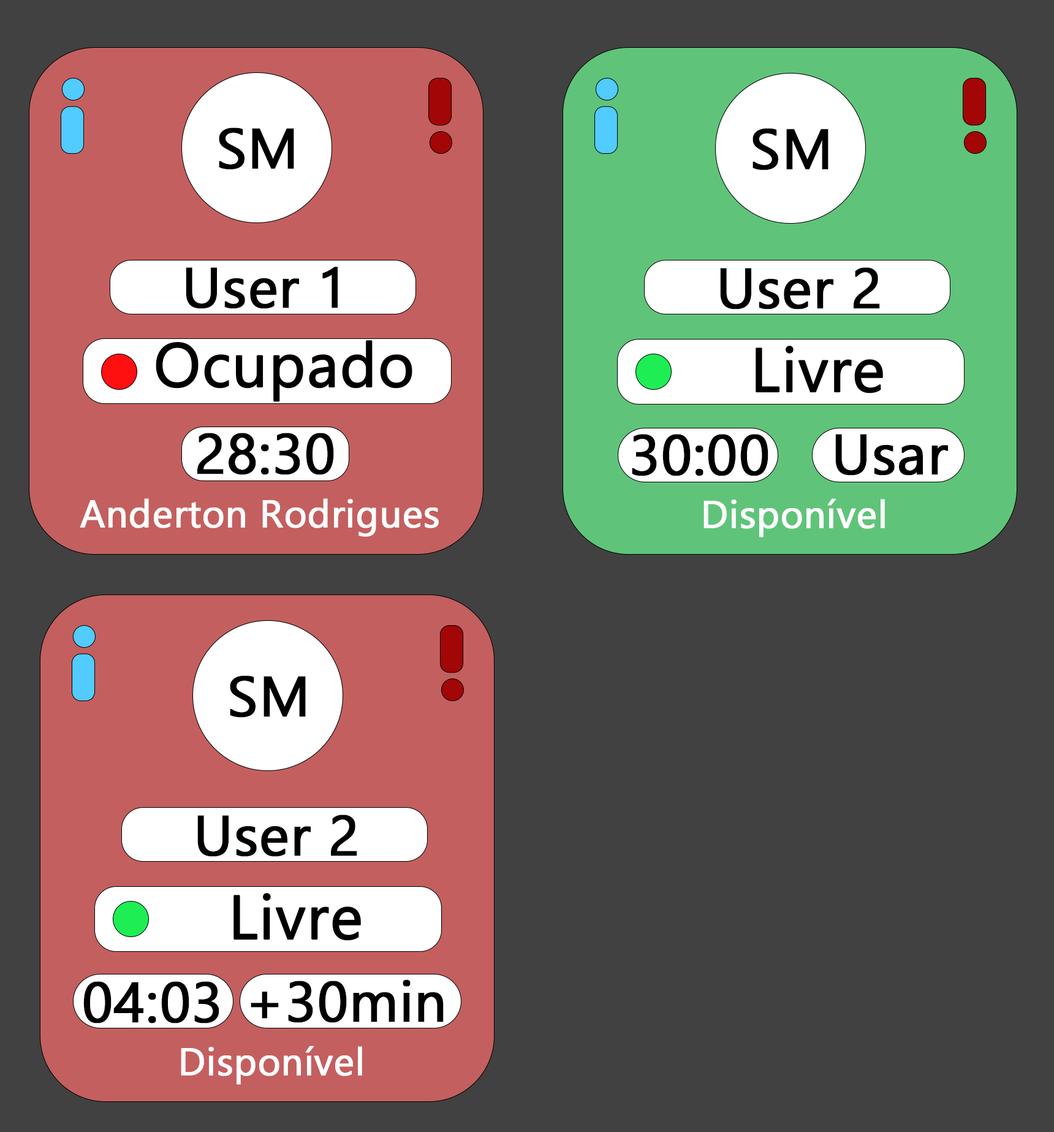
<style>
.page{position:relative;width:1054px;height:1132px;background:#414141}
.page>*{position:absolute;margin:0}
.t1{font:56.4px "SegoeUIHistoric";color:#000000;font-weight:bold}
.t2{font:61.8px "SegoeUIHistoric";color:#000000;font-weight:bold}
.t3{font:38.5px "SegoeUIHistoric";color:#ffffff;font-weight:bold}
</style>
<div class="page">
<p class="t1" style="left:219px;top:127px;width:75px;height:43px">SM</p>
<p class="t1" style="left:752px;top:128px;width:76px;height:42px">SM</p>
<p class="t1" style="left:186px;top:267px;width:152px;height:42px">User 1</p>
<p class="t1" style="left:720px;top:267px;width:160px;height:42px">User 2</p>
<p class="t2" style="left:156px;top:340px;width:256px;height:62px">Ocupado</p>
<p class="t2" style="left:755px;top:346px;width:128px;height:47px">Livre</p>
<p class="t1" style="left:197px;top:433px;width:137px;height:42px">28:30</p>
<p class="t1" style="left:632px;top:434px;width:136px;height:42px">30:00</p>
<p class="t1" style="left:835px;top:434px;width:113px;height:41px">Usar</p>
<p class="t3" style="left:80px;top:498px;width:359px;height:39px">Anderton Rodrigues</p>
<p class="t3" style="left:703px;top:498px;width:182px;height:39px">Disponível</p>
<p class="t1" style="left:230px;top:675px;width:76px;height:42px">SM</p>
<p class="t1" style="left:197px;top:814px;width:160px;height:42px">User 2</p>
<p class="t2" style="left:233px;top:893px;width:128px;height:47px">Livre</p>
<p class="t1" style="left:83px;top:981px;width:136px;height:42px">04:03</p>
<p class="t1" style="left:251px;top:979px;width:193px;height:44px">+30min</p>
<p class="t3" style="left:181px;top:1045px;width:181px;height:39px">Disponível</p>
</div>
